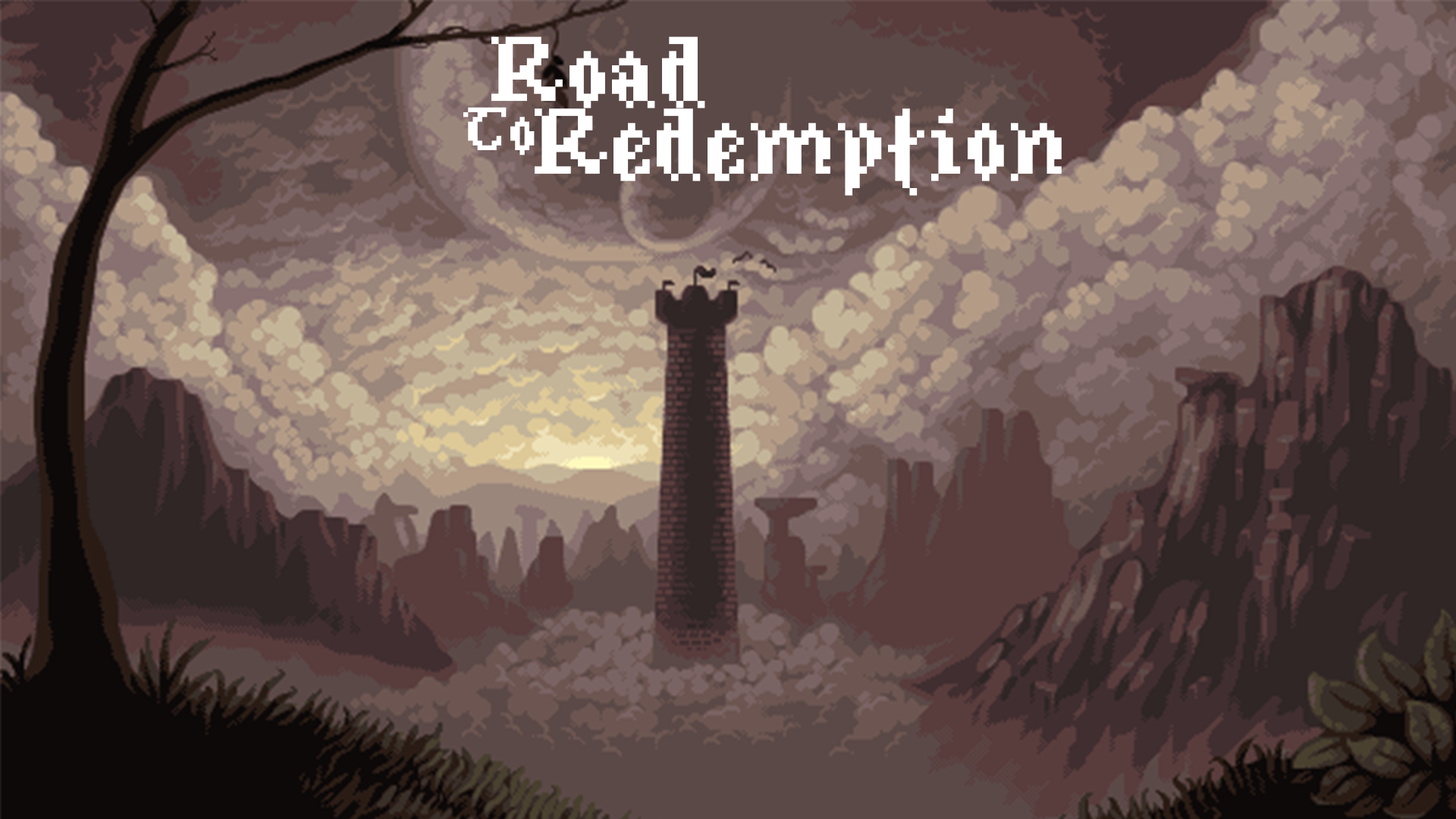
<style>
.page{position:relative;width:1456px;height:819px}
.page>*{position:absolute;margin:0}
.t1{font:113.7px "Medieval-Pixel";color:#ffffff}
.t2{font:75.8px "Medieval-Pixel";color:#ffffff}
.t3{font:115.6px "Medieval-Pixel";color:#ffffff}
</style>
<div class="page">
<p class="t1" style="left:491px;top:36px;width:214px;height:72px">Road</p>
<p class="t2" style="left:463px;top:107px;width:72px;height:48px">To</p>
<p class="t3" style="left:535px;top:108px;width:527px;height:88px">Redemption</p>
</div>
